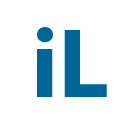
<style>
.page{position:relative;width:128px;height:128px;background:#ffffff}
.page>*{position:absolute;margin:0}
.t1{font:100px "MyriadPro-Bold";color:#006699}
</style>
<div class="page">
<p class="t1" style="left:37px;top:27px;width:70px;height:70px">iL</p>
</div>
